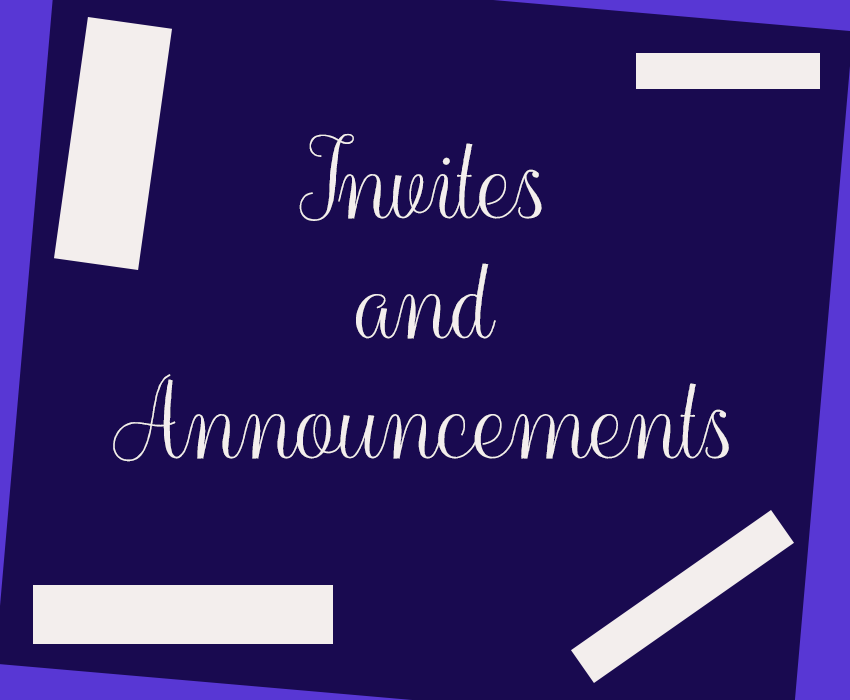
<style>
.page{position:relative;width:850px;height:700px;background:#190a50}
.page>*{position:absolute;margin:0}
.t1{font:100px "Balqis";color:#f3eeed}
</style>
<div class="page">
<p class="t1" style="left:113px;top:133px;width:616px;height:329px;text-align:center">Invites <br>and <br>Announcements</p>
</div>
